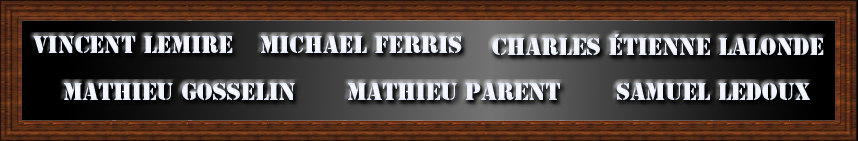
<style>
.page{position:relative;width:858px;height:141px}
.page>*{position:absolute;margin:0}
.t1{font:22.3px "StencilStd";color:#ffffff}
</style>
<div class="page">
<p class="t1" style="left:33px;top:36px;width:200px;height:17px">Vincent Lemire</p>
<p class="t1" style="left:261px;top:36px;width:201px;height:17px">Michael Ferris</p>
<p class="t1" style="left:492px;top:34px;width:332px;height:21px">Charles Étienne Lalonde</p>
<p class="t1" style="left:64px;top:83px;width:231px;height:17px">Mathieu Gosselin</p>
<p class="t1" style="left:348px;top:83px;width:212px;height:17px">Mathieu Parent</p>
<p class="t1" style="left:616px;top:83px;width:194px;height:17px">Samuel Ledoux</p>
</div>
